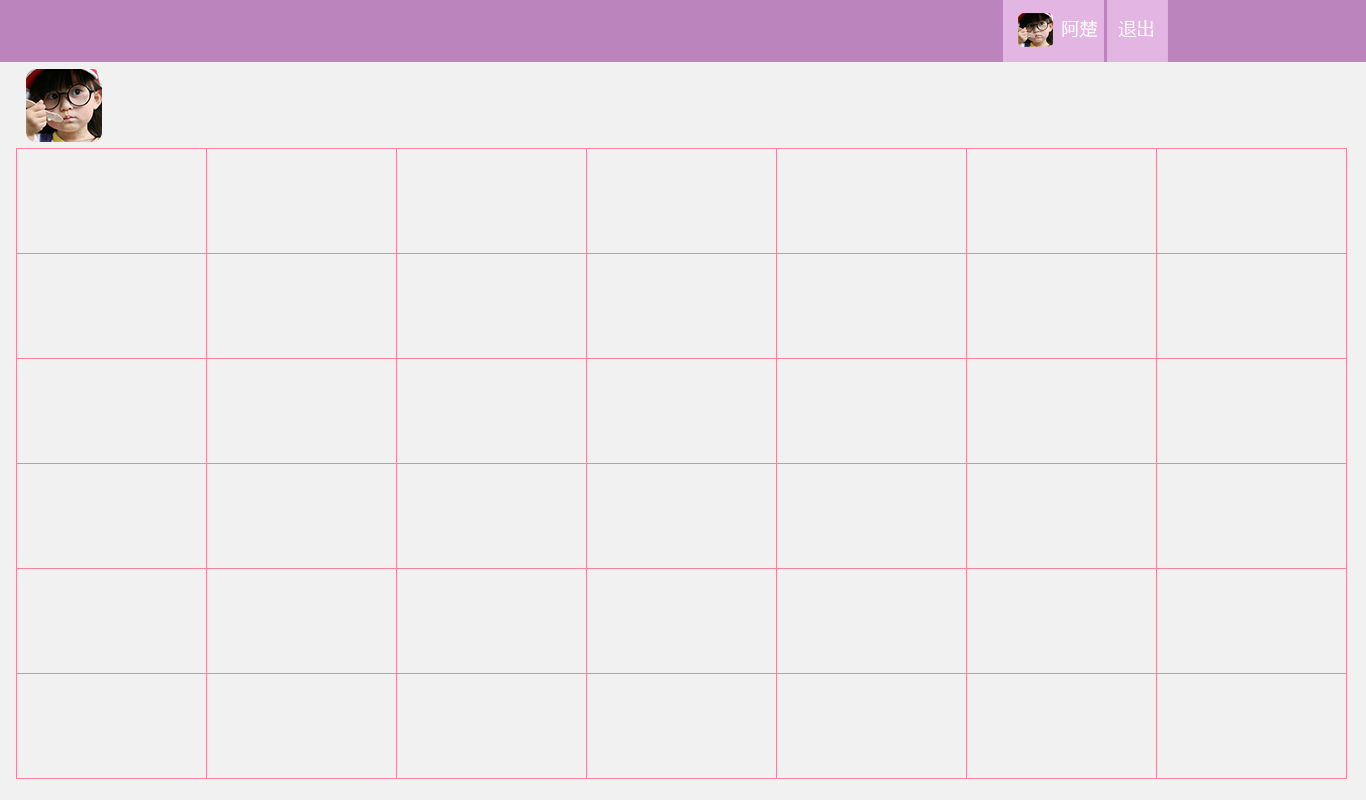
<style>
.page{position:relative;width:1366px;height:800px;background:#f1f1f1}
.page>*{position:absolute;margin:0}
.t1{font:18px "MicrosoftYaHei";color:#fefbfe}
</style>
<div class="page">
<p class="t1" style="left:1062px;top:20px;width:36px;height:18px">阿楚</p>
<p class="t1" style="left:1118px;top:20px;width:35px;height:17px">退出</p>
</div>
